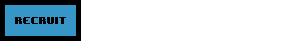
<style>
.page{position:relative;width:289px;height:41px;background:#ffffff}
.page>*{position:absolute;margin:0}
.t1{font:8px "8BITWONDERNominal";color:#000000}
</style>
<div class="page">
<p class="t1" style="left:15px;top:17px;width:51px;height:7px">RECRUIT</p>
</div>
